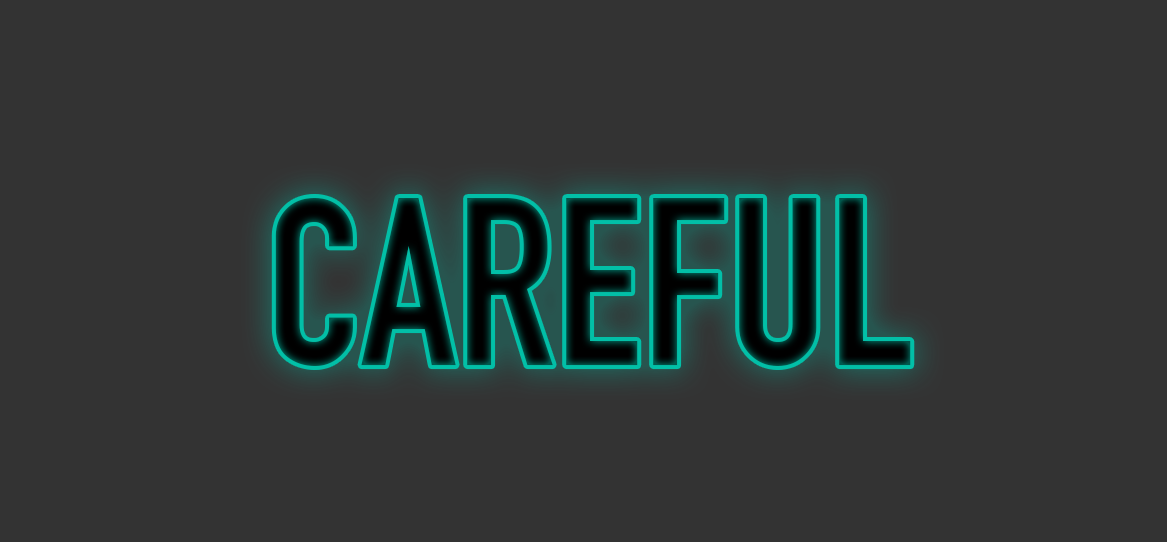
<style>
.page{position:relative;width:1167px;height:542px;background:#333333}
.page>*{position:absolute;margin:0}
.t1{font:233.7px "DINEngschrift";text-transform:uppercase}
</style>
<div class="page">
<p class="t1" style="left:275px;top:198px;width:636px;height:168px">careful</p>
</div>
